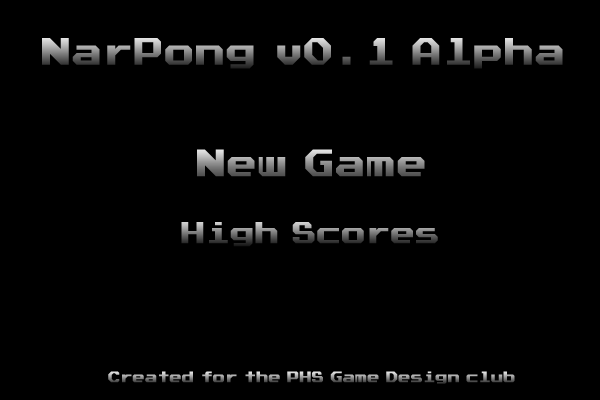
<style>
.page{position:relative;width:600px;height:400px;background:#000000}
.page>*{position:absolute;margin:0}
.t1{font:30px "Atari-Font-Full-Version";font-weight:bold}
.t2{font:24px "Atari-Font-Full-Version";font-weight:bold}
.t3{font:12px "Atari-Font-Full-Version";font-weight:bold}
</style>
<div class="page">
<p class="t1" style="left:42px;top:38px;width:521px;height:31px">NarPong v0.1 Alpha</p>
<p class="t1" style="left:197px;top:149px;width:228px;height:28px">New Game</p>
<p class="t2" style="left:181px;top:222px;width:257px;height:25px">High Scores</p>
<p class="t3" style="left:108px;top:371px;width:407px;height:13px">Created for the PHS Game Design club</p>
</div>
